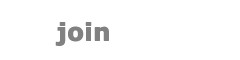
<style>
.page{position:relative;width:240px;height:60px;background:#ffffff}
.page>*{position:absolute;margin:0}
.t1{font:24px "Verdana-Bold";color:#818181;font-weight:bold}
</style>
<div class="page">
<p class="t1" style="left:55px;top:22px;width:54px;height:24px">join</p>
</div>
